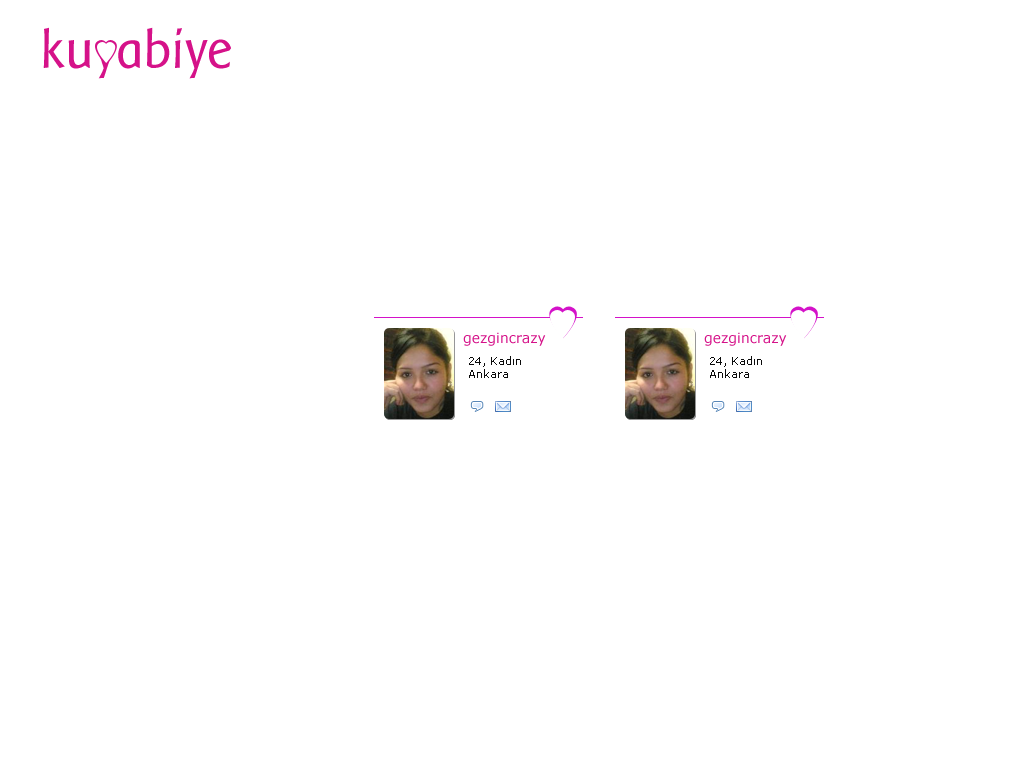
<style>
.page{position:relative;width:1024px;height:768px;background:#ffffff}
.page>*{position:absolute;margin:0}
.t1{font:54.8px "BaarSophia";color:#d51289}
.t2{font:14px "Verdana";color:#d51289}
.t3{font:11px "Verdana";color:#0b0b0b}
</style>
<div class="page">
<p class="t1" style="left:43px;top:27px;width:188px;height:52px">kuyabiye</p>
<p class="t2" style="left:463px;top:332px;width:83px;height:14px">gezgincrazy</p>
<p class="t2" style="left:704px;top:332px;width:83px;height:14px">gezgincrazy</p>
<p class="t3" style="left:469px;top:356px;width:52px;height:22px">24, Kadın<br>Ankara</p>
<p class="t3" style="left:710px;top:356px;width:52px;height:22px">24, Kadın<br>Ankara</p>
</div>
